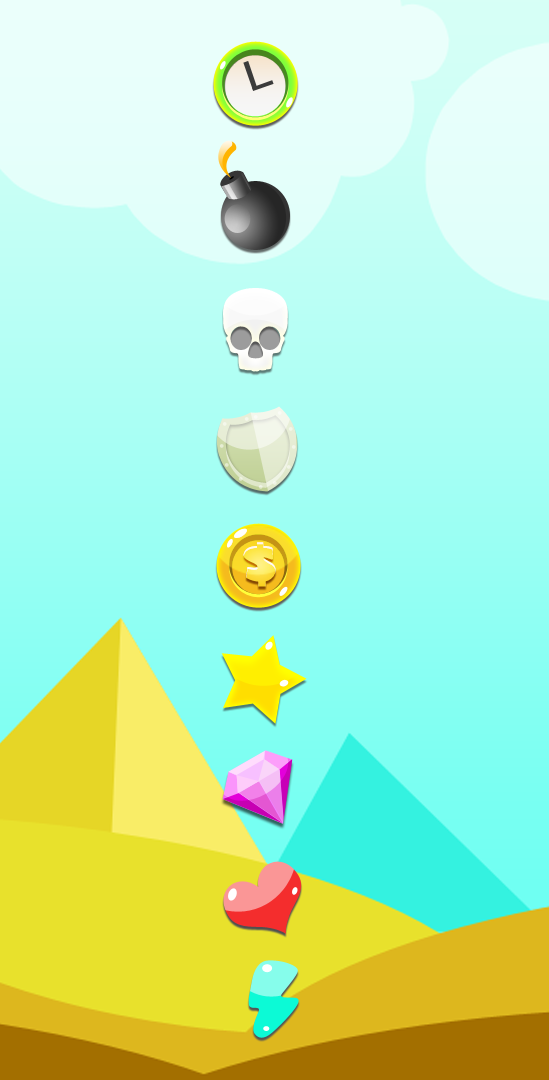
<style>
.page{position:relative;width:549px;height:1080px}
.page>*{position:absolute;margin:0}
.t1{font:56.3px "JuneBug";letter-spacing:-0.02em;scale:1.04 1}
</style>
<div class="page">
<p class="t1" style="left:243px;top:542px;width:33px;height:45px">$</p>
</div>
